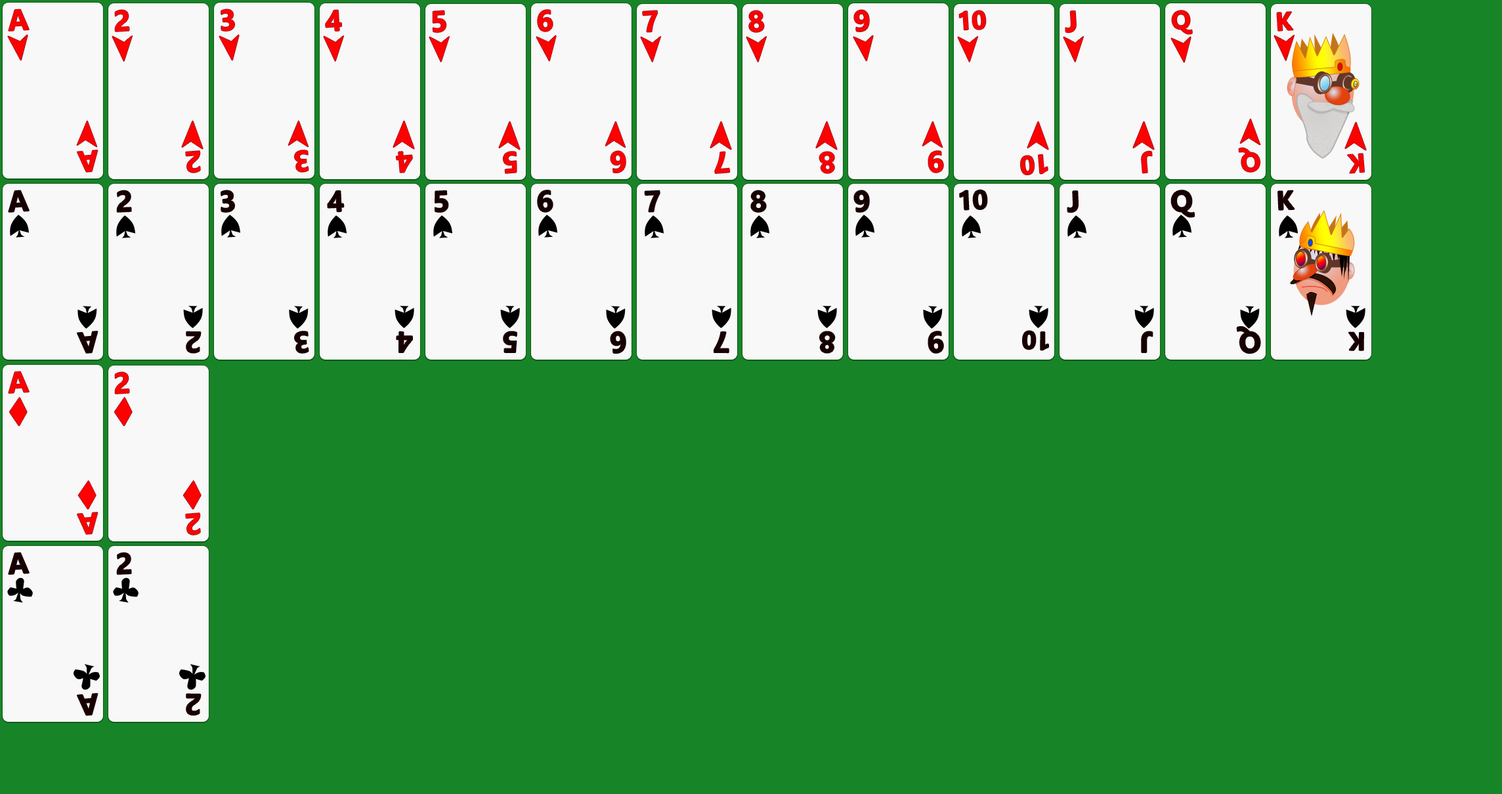
<style>
.page{position:relative;width:1502px;height:794px;background:#188428}
.page>*{position:absolute;margin:0}
.t1{font:29.3px "Gadugi-Bold";color:#ff0000}
.t2{font:25.6px "Gadugi-Bold";color:#ff0000}
.t3{font:25.7px "Gadugi-Bold";color:#ff0000}
.t4{font:26.4px "Gadugi-Bold";color:#ff0000}
.t5{font:26px "Gadugi-Bold";color:#ff0000}
.t6{font:29.3px "Gadugi-Bold";color:#170000}
.t7{font:26.5px "Gadugi-Bold";color:#170000}
.t8{font:25.1px "Gadugi-Bold";color:#170000}
</style>
<div class="page">
<p class="t1" style="left:9px;top:9px;width:20px;height:22px;rotate:-4deg">A</p>
<p class="t1" style="left:115px;top:10px;width:14px;height:22px;rotate:-4deg">2</p>
<p class="t1" style="left:221px;top:9px;width:13px;height:22px;rotate:-4deg">3</p>
<p class="t1" style="left:326px;top:10px;width:16px;height:21px;rotate:-4deg">4</p>
<p class="t1" style="left:432px;top:11px;width:14px;height:21px;rotate:-4deg">5</p>
<p class="t1" style="left:538px;top:10px;width:15px;height:22px;rotate:-4deg">6</p>
<p class="t1" style="left:643px;top:11px;width:15px;height:21px;rotate:-4deg">7</p>
<p class="t1" style="left:749px;top:11px;width:15px;height:21px;rotate:-4deg">8</p>
<p class="t1" style="left:854px;top:10px;width:15px;height:22px;rotate:-4deg">9</p>
<p class="t2" style="left:959px;top:11px;width:27px;height:19px;rotate:-4deg">10</p>
<p class="t1" style="left:1065px;top:11px;width:11px;height:22px;rotate:-4deg">J</p>
<p class="t3" style="left:1171px;top:11px;width:21px;height:23px;rotate:-4deg">Q</p>
<p class="t2" style="left:1276px;top:12px;width:17px;height:19px;rotate:-4deg">K</p>
<p class="t4" style="left:1238px;top:148px;width:21px;height:24px;rotate:175deg">Q</p>
<p class="t1" style="left:77px;top:150px;width:21px;height:22px;rotate:175deg">A</p>
<p class="t1" style="left:186px;top:151px;width:14px;height:22px;rotate:175deg">2</p>
<p class="t1" style="left:295px;top:150px;width:13px;height:22px;rotate:175deg">3</p>
<p class="t1" style="left:396px;top:152px;width:16px;height:21px;rotate:175deg">4</p>
<p class="t1" style="left:503px;top:152px;width:14px;height:21px;rotate:175deg">5</p>
<p class="t1" style="left:610px;top:151px;width:15px;height:22px;rotate:175deg">6</p>
<p class="t1" style="left:715px;top:152px;width:15px;height:21px;rotate:175deg">7</p>
<p class="t1" style="left:819px;top:152px;width:15px;height:21px;rotate:175deg">8</p>
<p class="t1" style="left:928px;top:151px;width:15px;height:22px;rotate:175deg">9</p>
<p class="t5" style="left:1021px;top:154px;width:26px;height:21px;rotate:175deg">10</p>
<p class="t1" style="left:1141px;top:151px;width:11px;height:22px;rotate:175deg">J</p>
<p class="t5" style="left:1347px;top:154px;width:17px;height:19px;rotate:175deg">K</p>
<p class="t6" style="left:9px;top:190px;width:20px;height:22px;rotate:-4deg">A</p>
<p class="t6" style="left:117px;top:190px;width:14px;height:22px;rotate:-3deg">2</p>
<p class="t6" style="left:221px;top:190px;width:13px;height:22px;rotate:-4deg">3</p>
<p class="t6" style="left:327px;top:191px;width:17px;height:21px;rotate:-3deg">4</p>
<p class="t6" style="left:434px;top:191px;width:14px;height:21px;rotate:-3deg">5</p>
<p class="t6" style="left:538px;top:190px;width:15px;height:22px;rotate:-4deg">6</p>
<p class="t6" style="left:644px;top:190px;width:16px;height:22px;rotate:-3deg">7</p>
<p class="t6" style="left:751px;top:190px;width:15px;height:22px;rotate:-3deg">8</p>
<p class="t6" style="left:854px;top:190px;width:15px;height:22px;rotate:-4deg">9</p>
<p class="t7" style="left:959px;top:190px;width:28px;height:20px;rotate:-3deg">10</p>
<p class="t6" style="left:1067px;top:191px;width:11px;height:22px;rotate:-3deg">J</p>
<p class="t6" style="left:1171px;top:190px;width:23px;height:27px;rotate:-4deg">Q</p>
<p class="t7" style="left:1278px;top:190px;width:16px;height:20px;rotate:-3deg">K</p>
<p class="t6" style="left:1236px;top:327px;width:24px;height:27px;rotate:175deg">Q</p>
<p class="t6" style="left:77px;top:331px;width:21px;height:22px;rotate:175deg">A</p>
<p class="t6" style="left:186px;top:331px;width:15px;height:22px;rotate:-180deg">2</p>
<p class="t6" style="left:295px;top:331px;width:13px;height:22px;rotate:175deg">3</p>
<p class="t6" style="left:396px;top:331px;width:16px;height:21px;rotate:-180deg">4</p>
<p class="t6" style="left:503px;top:331px;width:14px;height:21px;rotate:-180deg">5</p>
<p class="t6" style="left:610px;top:331px;width:15px;height:22px;rotate:175deg">6</p>
<p class="t6" style="left:714px;top:332px;width:14px;height:21px;rotate:-180deg">7</p>
<p class="t6" style="left:820px;top:331px;width:15px;height:22px;rotate:-180deg">8</p>
<p class="t6" style="left:928px;top:331px;width:15px;height:22px;rotate:175deg">9</p>
<p class="t8" style="left:1023px;top:331px;width:25px;height:19px;rotate:-180deg">10</p>
<p class="t6" style="left:1141px;top:331px;width:11px;height:21px;rotate:-180deg">J</p>
<p class="t8" style="left:1348px;top:332px;width:15px;height:18px;rotate:-180deg">K</p>
<p class="t1" style="left:9px;top:371px;width:20px;height:22px;rotate:-4deg">A</p>
<p class="t1" style="left:115px;top:372px;width:14px;height:22px;rotate:-4deg">2</p>
<p class="t1" style="left:77px;top:513px;width:21px;height:21px;rotate:175deg">A</p>
<p class="t1" style="left:186px;top:513px;width:14px;height:22px;rotate:175deg">2</p>
<p class="t6" style="left:9px;top:553px;width:20px;height:21px;rotate:-4deg">A</p>
<p class="t6" style="left:117px;top:553px;width:14px;height:21px;rotate:-3deg">2</p>
<p class="t6" style="left:77px;top:694px;width:21px;height:21px;rotate:175deg">A</p>
<p class="t6" style="left:186px;top:694px;width:15px;height:21px;rotate:-180deg">2</p>
</div>
